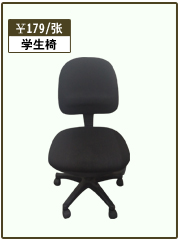
<style>
.page{position:relative;width:180px;height:240px;background:#f8fff7}
.page>*{position:absolute;margin:0}
.t1{font:12px "HeitiCSEG";color:#fefefe}
.t2{font:12px "HeitiCSEG";color:#010101}
</style>
<div class="page">
<p class="t1" style="left:16px;top:22px;width:47px;height:13px">￥179/张</p>
<p class="t2" style="left:21px;top:38px;width:36px;height:12px">学生椅</p>
</div>
